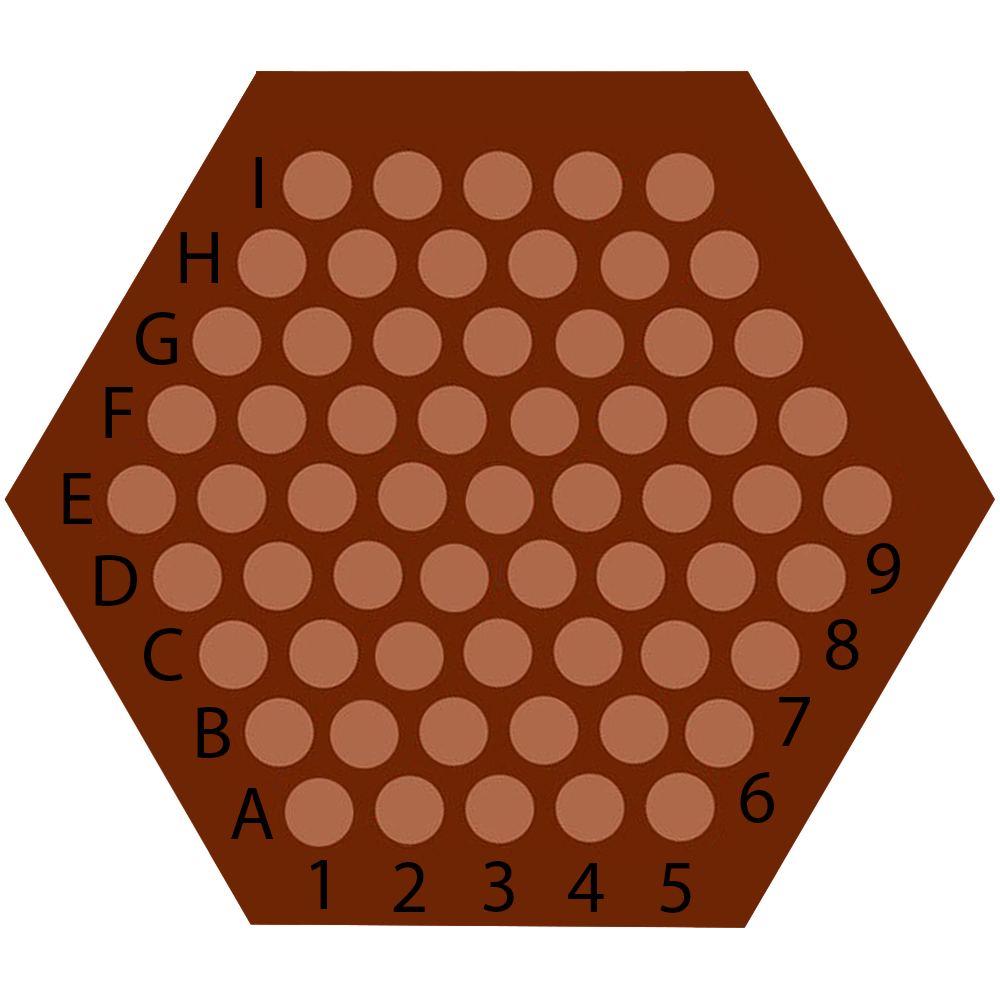
<style>
.page{position:relative;width:1000px;height:1000px;background:#ffffff}
.page>*{position:absolute;margin:0}
.t1{font:75px "MyriadPro-Regular";color:#000000}
</style>
<div class="page">
<p class="t1" style="left:255px;top:157px;width:7px;height:51px">I</p>
<p class="t1" style="left:180px;top:232px;width:38px;height:51px">H</p>
<p class="t1" style="left:136px;top:312px;width:41px;height:53px">G</p>
<p class="t1" style="left:105px;top:387px;width:28px;height:51px">F</p>
<p class="t1" style="left:63px;top:473px;width:29px;height:51px">E</p>
<p class="t1" style="left:867px;top:543px;width:33px;height:51px">9</p>
<p class="t1" style="left:95px;top:555px;width:42px;height:51px">D</p>
<p class="t1" style="left:144px;top:628px;width:39px;height:53px">C</p>
<p class="t1" style="left:826px;top:619px;width:33px;height:51px">8</p>
<p class="t1" style="left:779px;top:697px;width:31px;height:49px">7</p>
<p class="t1" style="left:197px;top:707px;width:33px;height:51px">B</p>
<p class="t1" style="left:740px;top:772px;width:34px;height:51px">6</p>
<p class="t1" style="left:231px;top:788px;width:43px;height:51px">A</p>
<p class="t1" style="left:310px;top:860px;width:17px;height:49px">1</p>
<p class="t1" style="left:393px;top:862px;width:32px;height:50px">2</p>
<p class="t1" style="left:483px;top:861px;width:31px;height:51px">3</p>
<p class="t1" style="left:568px;top:863px;width:36px;height:49px">4</p>
<p class="t1" style="left:660px;top:863px;width:31px;height:50px">5</p>
</div>
